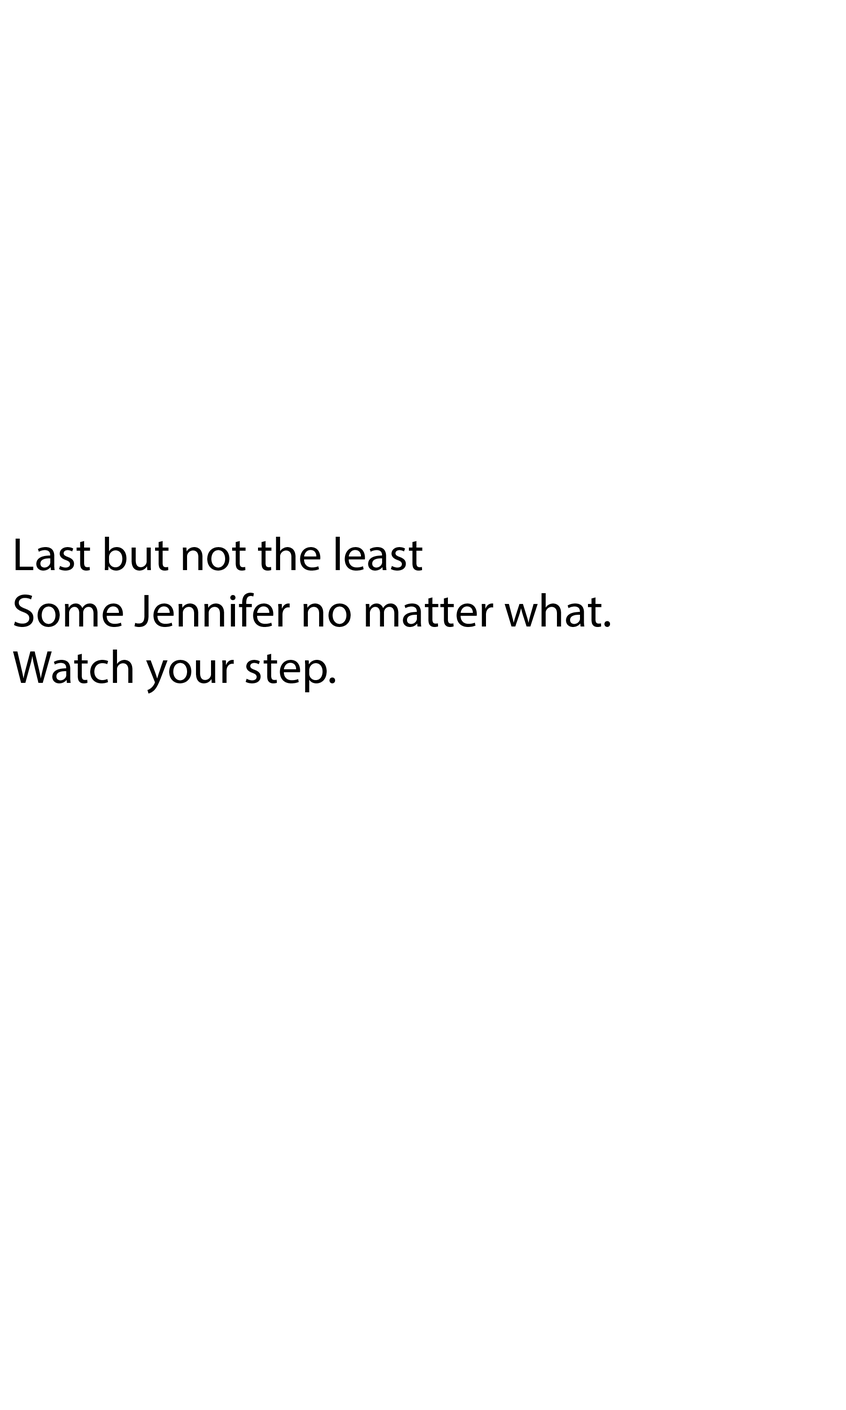
<style>
.page{position:relative;width:846px;height:1410px;background:#ffffff}
.page>*{position:absolute;margin:0}
.t1{font:47px "MyriadPro-Regular";color:#000000}
</style>
<div class="page">
<p class="t1" style="left:13px;top:537px;width:597px;height:157px">Last but not the least<br>Some Jennifer no matter what.<br>Watch your step.</p>
</div>
